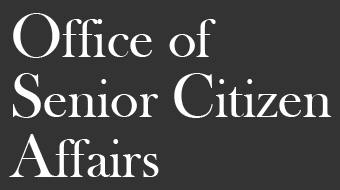
<style>
.page{position:relative;width:340px;height:190px;background:#333333}
.page>*{position:absolute;margin:0}
.t1{font:55px/60px "BaskOldFace";color:#ffffff}
.t2{font:65px/60px "BaskOldFace";color:#ffffff}
</style>
<div class="page">
<p class="t1" style="left:9px;top:13px;width:323px;height:164px"><span class="t2">O</span>ffice of <br><span class="t2">S</span>enior <span class="t2">C</span>itizen<br><span class="t2">A</span>ffairs</p>
</div>
